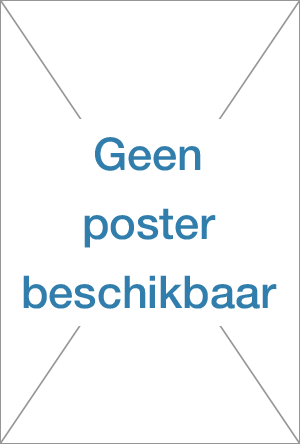
<style>
.page{position:relative;width:300px;height:444px;background:#ffffff}
.page>*{position:absolute;margin:0}
.t1{font:45px/34.5px "HelveticaNeueMedium";color:#317eac}
</style>
<div class="page">
<p class="t1" style="left:23px;top:137px;width:254px;height:172px;text-align:center">Geen<br><br>poster<br><br>beschikbaar</p>
</div>
